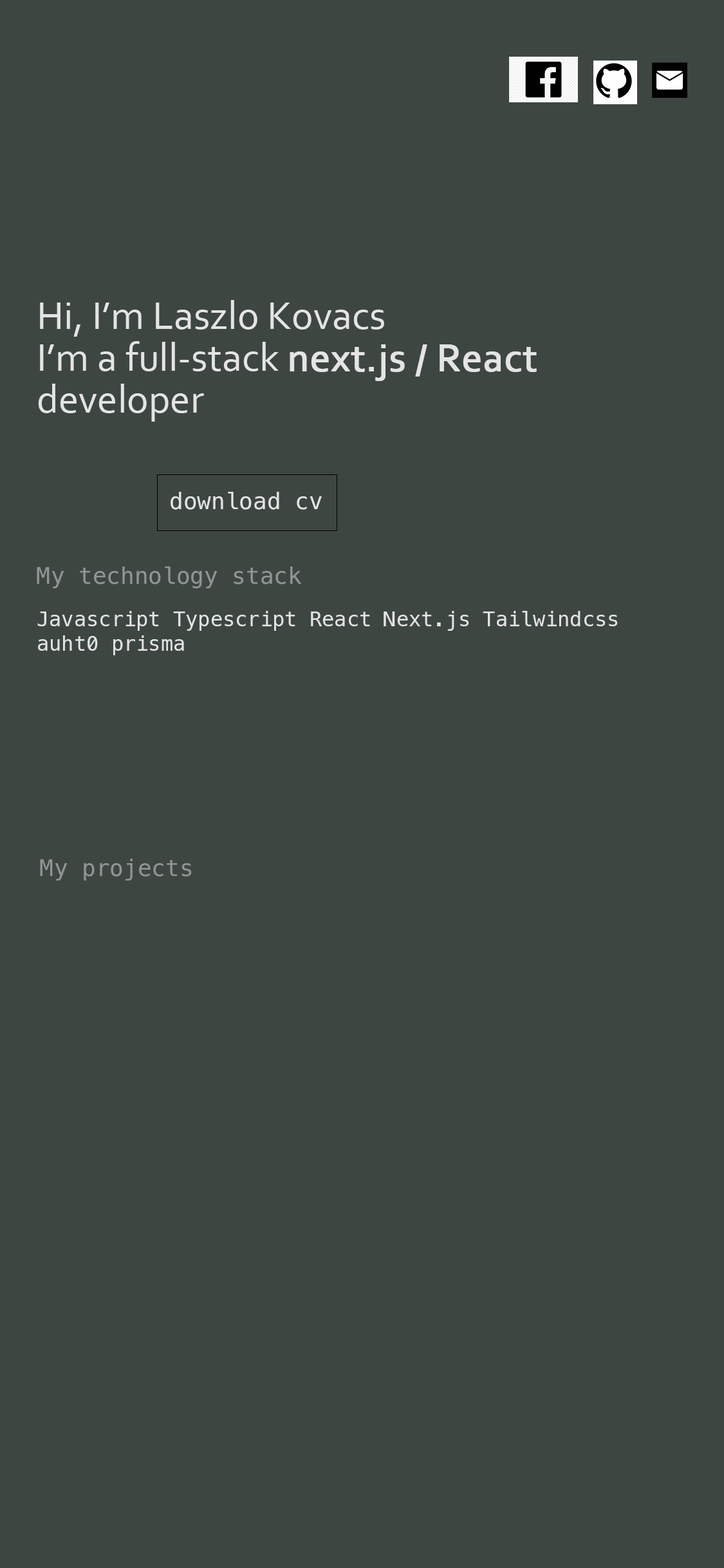
<style>
.page{position:relative;width:724px;height:1568px;background:#3e4642}
.page>*{position:absolute;margin:0}
.t1{font:40.6px/41.8px "Corbel";color:#e4e4e4}
.t2{font:40.6px/41.8px "Corbel";color:#e4e4e4;font-weight:bold}
.t3{font:23.2px "MesloLGM-Regular";color:#e4e4e4}
.t4{font:23.2px "MesloLGM-Regular";color:#929594}
.t5{font:20.6px "MesloLGM-Regular";color:#e4e4e4}
</style>
<div class="page">
<p class="t1" style="left:38px;top:300px;width:499px;height:122px">Hi, I’m Laszlo Kovacs<br>I’m a full-stack <span class="t2">next.js / React</span> developer</p>
<p class="t3" style="left:171px;top:492px;width:151px;height:18px">download cv</p>
<p class="t4" style="left:37px;top:566px;width:265px;height:22px">My technology stack</p>
<p class="t5" style="left:37px;top:611px;width:581px;height:44px">Javascript Typescript React Next.js Tailwindcss auht0 prisma</p>
<p class="t4" style="left:40px;top:859px;width:152px;height:22px">My projects</p>
</div>
